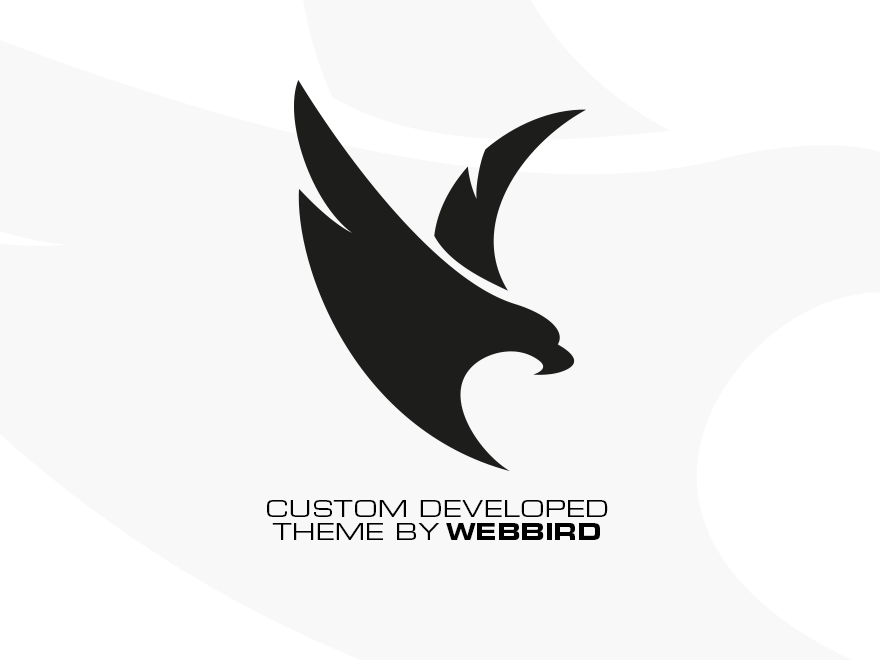
<style>
.page{position:relative;width:880px;height:660px;background:#f8f8f8}
.page>*{position:absolute;margin:0}
.t1{font:22.5px/23.3px "Eurostile-ExtendedTwo";color:#000000;text-transform:uppercase}
.t2{font:22.5px/23.3px "Eurostile-BoldExtendedTwo";color:#000000;text-transform:uppercase}
</style>
<div class="page">
<p class="t1" style="left:267px;top:500px;width:341px;height:40px;text-align:center">CUSTOM developed<br>theme by <span class="t2">webbird</span></p>
</div>
